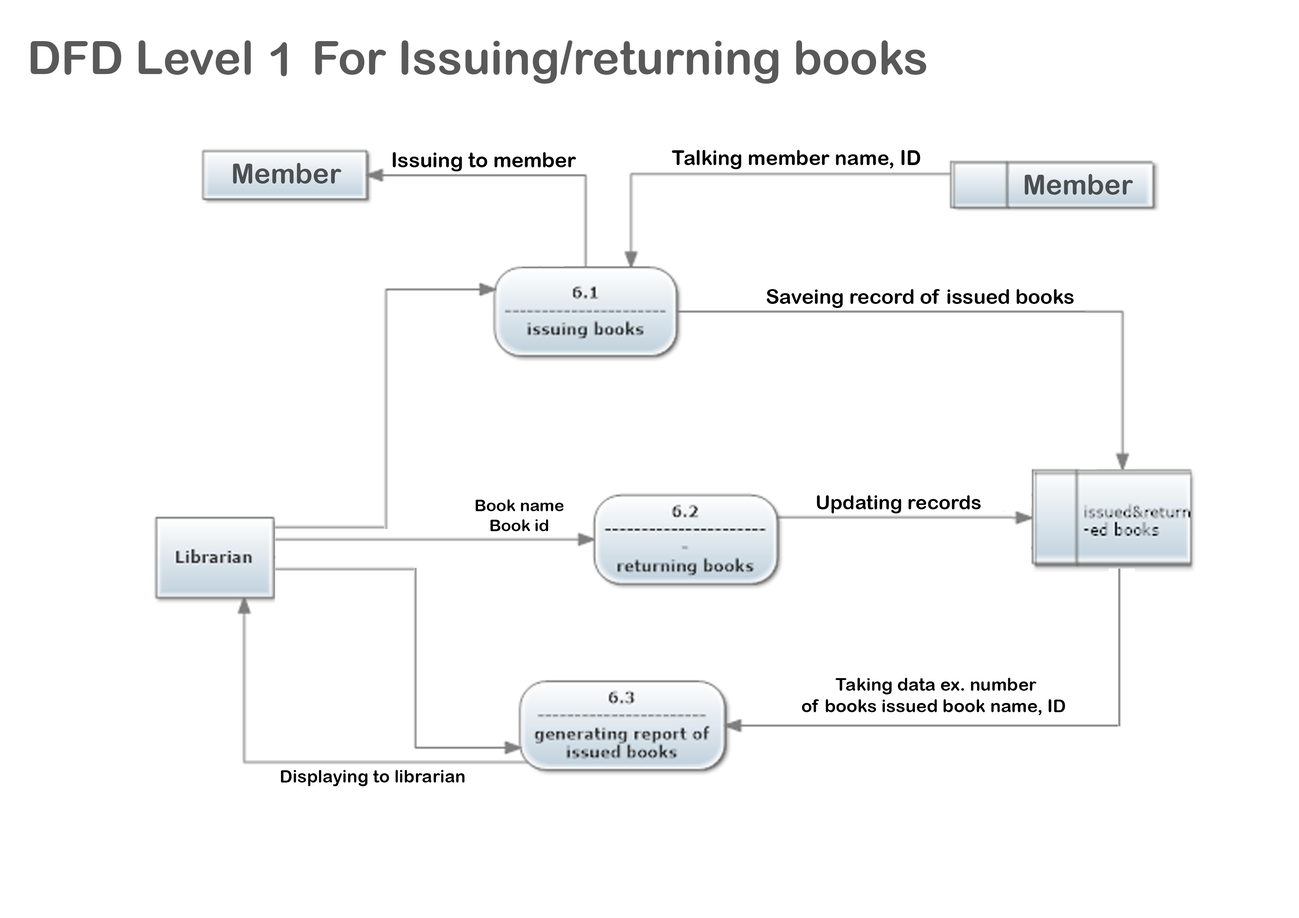
<style>
.page{position:relative;width:1299px;height:918px;background:#ffffff}
.page>*{position:absolute;margin:0}
.t1{font:46.3px "ArialRoundedMTBold";color:#595959}
.t2{font:20.7px "ArialRoundedMTBold";color:#000000}
.t3{font:27.8px "ArialRoundedMTBold";color:#4c4f51}
.t4{font:27.8px "ArialRoundedMTBold";color:#4a4e51}
.t5{font:20.3px "ArialRoundedMTBold";color:#000000}
.t6{font:19.6px "ArialRoundedMTBold";color:#000000}
.t7{font:16.4px "ArialRoundedMTBold";color:#000000}
.t8{font:17.9px "ArialRoundedMTBold";color:#000000}
.t9{font:17.6px "ArialRoundedMTBold";color:#000000}
</style>
<div class="page">
<p class="t1" style="left:30px;top:40px;width:896px;height:44px">DFD Level     For Issuing/returning books</p>
<p class="t1" style="left:270px;top:42px;width:17px;height:34px">1</p>
<p class="t2" style="left:672px;top:150px;width:248px;height:19px">Talking member name, ID</p>
<p class="t2" style="left:392px;top:152px;width:184px;height:19px">Issuing to member</p>
<p class="t3" style="left:233px;top:163px;width:108px;height:21px">Member</p>
<p class="t4" style="left:1024px;top:174px;width:109px;height:21px">Member</p>
<p class="t5" style="left:766px;top:289px;width:308px;height:19px">Saveing record of issued books</p>
<p class="t6" style="left:817px;top:495px;width:164px;height:18px">Updating records</p>
<p class="t7" style="left:475px;top:499px;width:88px;height:32px;text-align:center">Book name<br>Book id</p>
<p class="t8" style="left:802px;top:678px;width:263px;height:37px;text-align:center">Taking data ex. number <br>of books issued book name, ID</p>
<p class="t9" style="left:281px;top:770px;width:184px;height:16px">Displaying to librarian</p>
</div>
